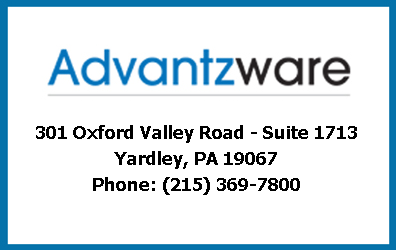
<style>
.page{position:relative;width:396px;height:250px;background:#ffffff}
.page>*{position:absolute;margin:0}
.t1{font:18px/26px "Tahoma-Bold";color:#000000}
</style>
<div class="page">
<p class="t1" style="left:36px;top:125px;width:321px;height:70px;text-align:center">301 Oxford Valley Road - Suite 1713<br>Yardley, PA 19067<br>Phone: (215) 369-7800</p>
</div>
